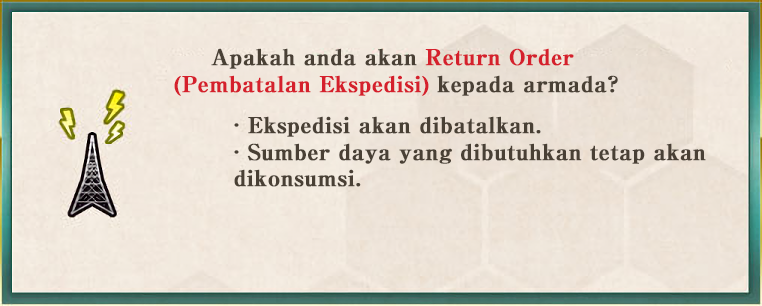
<style>
.page{position:relative;width:762px;height:306px}
.page>*{position:absolute;margin:0}
.t1{font:22px "RyuminPro-ExBold";color:#d5202c;font-weight:bold}
.t2{font:22px "RyuminPro-ExBold";color:#494035;font-weight:bold}
</style>
<div class="page">
<p class="t1" style="left:174px;top:48px;width:444px;height:48px;text-align:center"><span class="t2">Apakah anda akan </span>Return Order <br>(Pembatalan Ekspedisi)<span class="t2"> kepada armada?</span></p>
<p class="t2" style="left:234px;top:116px;width:472px;height:71px">· Ekspedisi akan dibatalkan.<br>· Sumber daya yang dibutuhkan tetap akan<br>dikonsumsi.</p>
</div>
